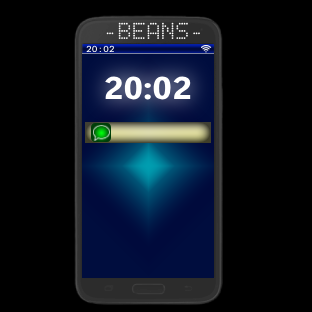
<style>
.page{position:relative;width:312px;height:312px;background:#000000}
.page>*{position:absolute;margin:0}
.t1{font:24px "BPdots";color:#ffffff}
.t2{font:8.8px "AzeretMono-Regular";color:#ffffff}
.t3{font:31.6px "SegoeUIVariable-BoldDisplay";color:#ffffff;scale:1.09 1}
</style>
<div class="page">
<p class="t1" style="left:106px;top:22px;width:94px;height:17px">-BEANS-</p>
<p class="t2" style="left:86px;top:45px;width:28px;height:7px">20:02</p>
<p class="t3" style="left:105px;top:76px;width:86px;height:24px">20:02</p>
</div>
